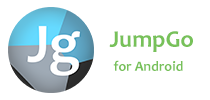
<style>
.page{position:relative;width:210px;height:100px;background:#ffffff}
.page>*{position:absolute;margin:0}
.t1{font:24px "Candara-Bold";color:#77c159}
.t2{font:14px "Candara-Bold";color:#77c159}
</style>
<div class="page">
<p class="t1" style="left:109px;top:31px;width:84px;height:21px">JumpGo</p>
<p class="t2" style="left:113px;top:60px;width:70px;height:11px">for Android</p>
</div>
